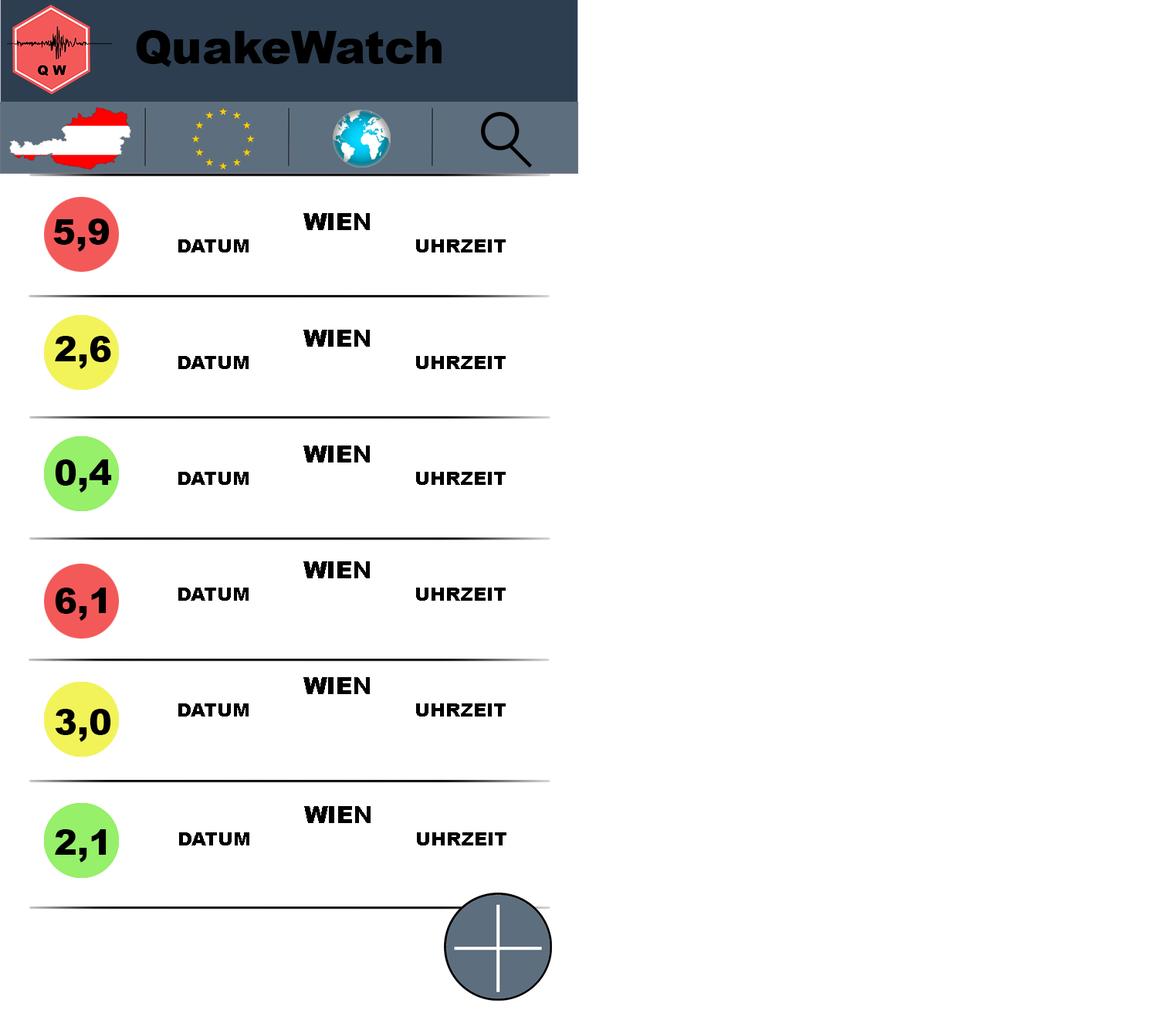
<style>
.page{position:relative;width:1158px;height:1030px;background:#ffffff}
.page>*{position:absolute;margin:0}
.t1{font:45.2px "Arial-Black";color:#000000}
.t2{font:34.7px "Arial-Black";color:#000000}
.t3{font:18.5px "Arial-Black";color:#000000}
.t4{font:18.5px "MyriadPro-Regular";color:#000000}
.t5{font:23.2px "Arial-Black";color:#000000}
</style>
<div class="page">
<p class="t1" style="left:136px;top:30px;width:306px;height:37px">QuakeWatch</p>
<p class="t2" style="left:53px;top:218px;width:57px;height:34px">5,9</p>
<p class="t3" style="left:178px;top:213px;width:328px;height:39px"><span class="t4">     </span><span class="t5">WIEN<br></span>  DATUM      UHRZEIT</p>
<p class="t3" style="left:178px;top:330px;width:328px;height:39px"><span class="t4">     </span><span class="t5">WIEN<br></span>  DATUM      UHRZEIT</p>
<p class="t2" style="left:55px;top:336px;width:56px;height:33px">2,6</p>
<p class="t3" style="left:178px;top:445px;width:328px;height:40px"><span class="t4">     </span><span class="t5">WIEN<br></span>  DATUM      UHRZEIT</p>
<p class="t2" style="left:55px;top:459px;width:57px;height:34px">0,4</p>
<p class="t3" style="left:178px;top:561px;width:328px;height:40px"><span class="t4">     </span><span class="t5">WIEN<br></span>  DATUM      UHRZEIT</p>
<p class="t2" style="left:55px;top:587px;width:52px;height:34px">6,1</p>
<p class="t3" style="left:178px;top:677px;width:328px;height:39px"><span class="t4">     </span><span class="t5">WIEN<br></span>  DATUM      UHRZEIT</p>
<p class="t2" style="left:55px;top:709px;width:56px;height:33px">3,0</p>
<p class="t3" style="left:179px;top:806px;width:327px;height:39px"><span class="t4">     </span><span class="t5">WIEN<br></span>  DATUM      UHRZEIT</p>
<p class="t2" style="left:55px;top:829px;width:52px;height:33px">2,1</p>
</div>
